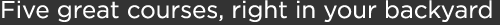
<style>
.page{position:relative;width:500px;height:25px;background:#333333}
.page>*{position:absolute;margin:0}
.t1{font:24px "Gotham-Book";color:#ffffff}
</style>
<div class="page">
<p class="t1" style="left:2px;top:0px;width:490px;height:22px">Five great courses, right in your backyard</p>
</div>
